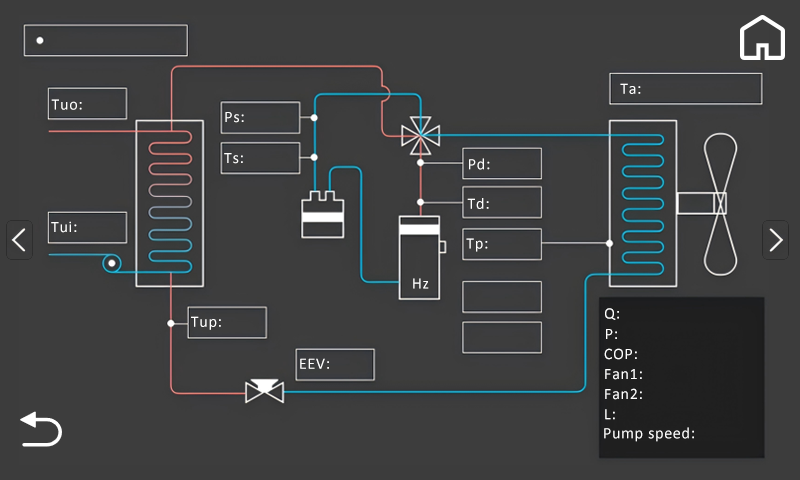
<style>
.page{position:relative;width:800px;height:480px;background:#3d3d3d}
.page>*{position:absolute;margin:0}
.t1{font:16px "Calibri";letter-spacing:0.045em;color:#ffffff}
</style>
<div class="page">
<p class="t1" style="left:620px;top:83px;width:21px;height:11px">Ta:</p>
<p class="t1" style="left:51px;top:99px;width:31px;height:11px">Tuo:</p>
<p class="t1" style="left:225px;top:112px;width:19px;height:11px">Ps:</p>
<p class="t1" style="left:224px;top:153px;width:19px;height:11px">Ts:</p>
<p class="t1" style="left:469px;top:158px;width:21px;height:12px">Pd:</p>
<p class="t1" style="left:467px;top:198px;width:22px;height:11px">Td:</p>
<p class="t1" style="left:51px;top:221px;width:26px;height:12px">Tui:</p>
<p class="t1" style="left:466px;top:238px;width:22px;height:14px">Tp:</p>
<p class="t1" style="left:413px;top:278px;width:16px;height:11px">Hz</p>
<p class="t1" style="left:191px;top:316px;width:30px;height:14px">Tup:</p>
<p class="t1" style="left:605px;top:308px;width:14px;height:12px">Q:</p>
<p class="t1" style="left:606px;top:329px;width:11px;height:10px">P:</p>
<p class="t1" style="left:604px;top:348px;width:33px;height:12px">COP:</p>
<p class="t1" style="left:300px;top:358px;width:29px;height:11px">EEV:</p>
<p class="t1" style="left:605px;top:369px;width:37px;height:11px">Fan1:</p>
<p class="t1" style="left:605px;top:388px;width:37px;height:12px">Fan2:</p>
<p class="t1" style="left:605px;top:409px;width:10px;height:11px">L:</p>
<p class="t1" style="left:604px;top:427px;width:90px;height:15px">Pump speed:</p>
</div>
